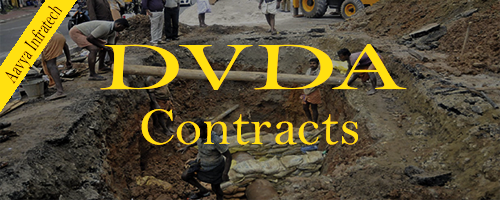
<style>
.page{position:relative;width:500px;height:200px}
.page>*{position:absolute;margin:0}
.t1{font:20.9px "BellMT";color:#000000;scale:0.65 1}
.t2{font:69.2px "BellMT";color:#ffe010;scale:1.6 1}
.t3{font:53.6px "BellMT";color:#ffe010}
</style>
<div class="page">
<p class="t1" style="left:5px;top:5px;width:58px;height:79px;rotate:-56deg">Aavya Infratech</p>
<p class="t2" style="left:100px;top:44px;width:307px;height:46px">DVDA</p>
<p class="t3" style="left:141px;top:109px;width:217px;height:36px">Contracts</p>
</div>
